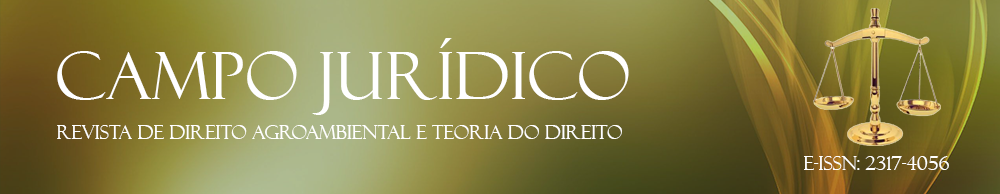
<style>
.page{position:relative;width:1000px;height:194px}
.page>*{position:absolute;margin:0}
.t1{font:66px "FelixTitlingMT";color:#ffffff}
.t2{font:19px "FelixTitlingMT";color:#ffffff}
</style>
<div class="page">
<p class="t1" style="left:57px;top:38px;width:572px;height:77px">Campo Jurídico</p>
<p class="t2" style="left:57px;top:125px;width:565px;height:14px">Revista de Direito Agroambiental e Teoria do Direito</p>
<p class="t2" style="left:804px;top:156px;width:145px;height:14px">e-ISSN: 2317-4056</p>
</div>
